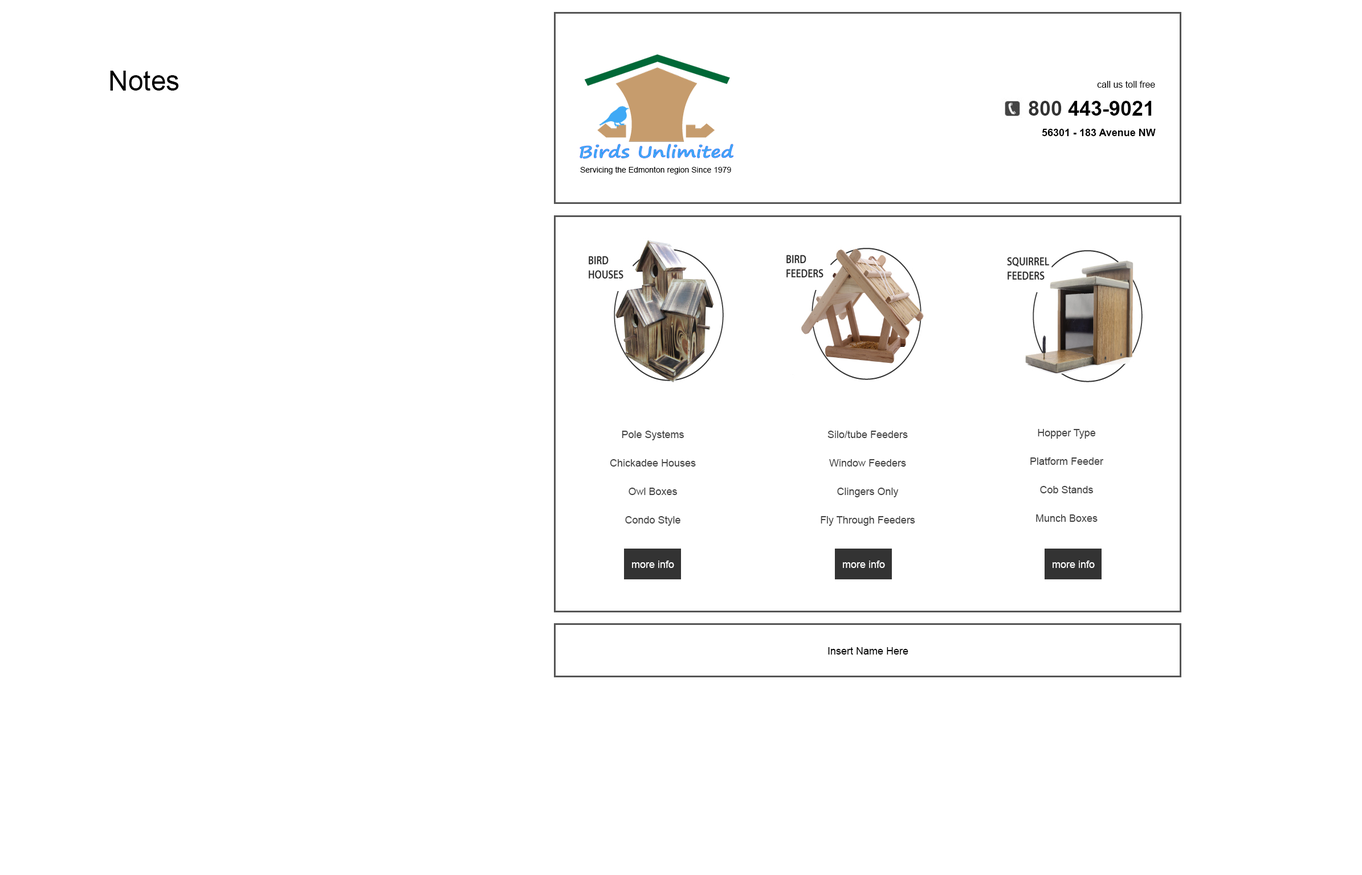
<style>
.page{position:relative;width:1362px;height:875px;background:#ffffff}
.page>*{position:absolute;margin:0}
.t1{font:27.4px "ArialMT";color:#000000}
.t2{font:9.1px "ArialMT";color:#000000}
.t3{font:20.5px "Arial-BoldMT";color:#000000}
.t4{font:20.5px "Arial-BoldMT";color:#333333}
.t5{font:10.3px "Arial-BoldMT";color:#000000}
.t6{font:8px "ArialMT";color:#000000}
.t7{font:10.4px/28.5px "ArialMT";color:#444444}
.t8{font:10.4px "ArialMT";color:#ffffff}
.t9{font:10.3px "ArialMT";color:#000000}
</style>
<div class="page">
<p class="t1" style="left:110px;top:71px;width:69px;height:20px">Notes</p>
<p class="t2" style="left:1097px;top:81px;width:58px;height:7px">call us toll free</p>
<p class="t3" style="left:1029px;top:101px;width:123px;height:15px"><span class="t4">800</span> 443-9021</p>
<p class="t5" style="left:1042px;top:129px;width:114px;height:7px">56301 - 183 Avenue NW</p>
<p class="t6" style="left:580px;top:166px;width:151px;height:8px">Servicing the Edmonton region Since 1979</p>
<p class="t7" style="left:610px;top:431px;width:86px;height:95px;text-align:center">Pole Systems<br>Chickadee Houses<br>Owl Boxes<br>Condo Style</p>
<p class="t7" style="left:821px;top:431px;width:94px;height:95px;text-align:center">Silo/tube Feeders<br>Window Feeders<br>Clingers Only<br>Fly Through Feeders</p>
<p class="t7" style="left:1030px;top:429px;width:74px;height:93px;text-align:center">Hopper Type<br>Platform Feeder<br>Cob Stands<br>Munch Boxes</p>
<p class="t8" style="left:632px;top:561px;width:42px;height:7px">more info</p>
<p class="t8" style="left:843px;top:561px;width:42px;height:7px">more info</p>
<p class="t8" style="left:1053px;top:561px;width:42px;height:7px">more info</p>
<p class="t9" style="left:828px;top:647px;width:80px;height:8px">Insert Name Here</p>
</div>
